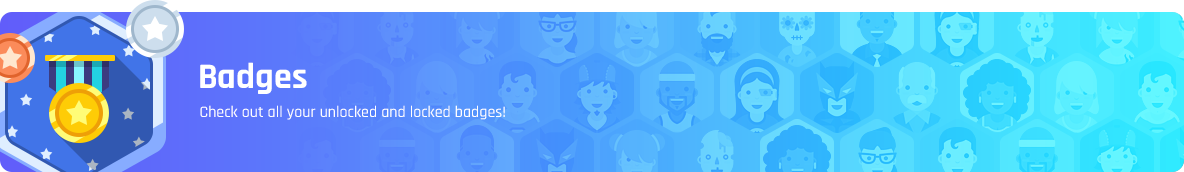
<style>
.page{position:relative;width:1184px;height:172px}
.page>*{position:absolute;margin:0}
.t1{font:36px "Rajdhani-Bold";color:#ffffff}
.t2{font:16px "Rajdhani-Medium";color:#ffffff}
</style>
<div class="page">
<p class="t1" style="left:200px;top:62px;width:107px;height:32px">Badges</p>
<p class="t2" style="left:200px;top:105px;width:305px;height:15px">Check out all your unlocked and locked badges!</p>
</div>
